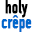
<style>
.page{position:relative;width:32px;height:32px;background:#ffffff}
.page>*{position:absolute;margin:0}
.t1{font:18px/15px "DINCondensed-Bold";color:#0066cc;font-weight:bold;scale:0.89 1}
.t2{font:18px/15px "DINCondensed-Bold";color:#000000;font-weight:bold;scale:0.89 1}
</style>
<div class="page">
<p class="t1" style="left:1px;top:0px;width:31px;height:33px;text-align:center"><span class="t2">holy<br></span>crêpe</p>
</div>
